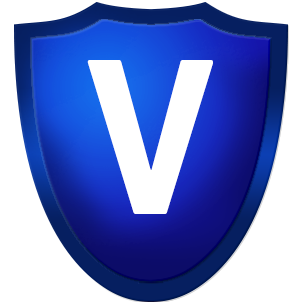
<style>
.page{position:relative;width:302px;height:302px;background:#ffffff}
.page>*{position:absolute;margin:0}
.t1{font:220px "Barlow-Bold";color:#ffffff}
</style>
<div class="page">
<p class="t1" style="left:87px;top:60px;width:126px;height:154px">V</p>
</div>
